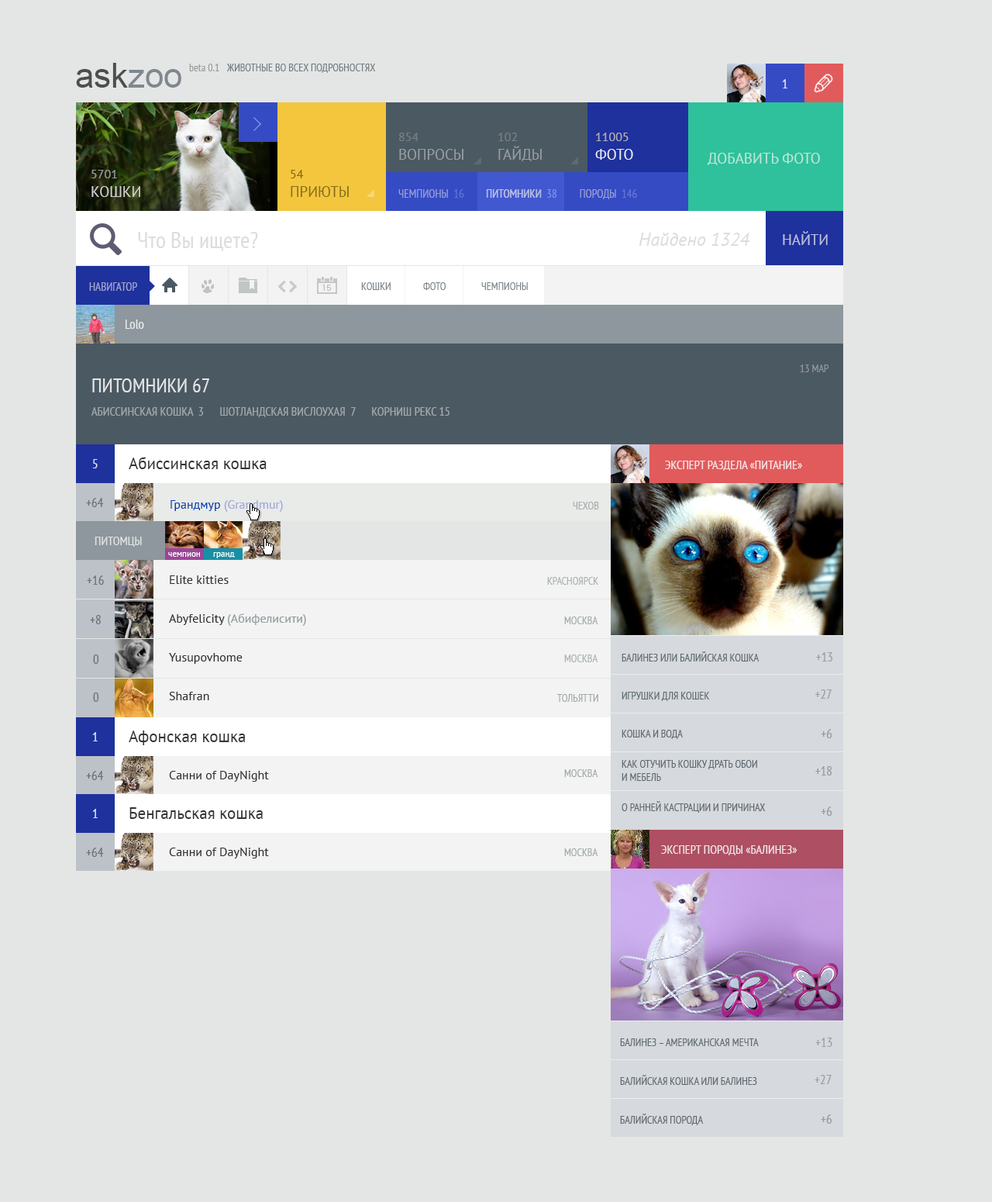
<style>
.page{position:relative;width:992px;height:1202px;background:#e4e6e5}
.page>*{position:absolute;margin:0}
.t1{font:34.1px "ArialMT"}
.t2{font:10.9px "PTSans-Narrow";color:#9a9c9b}
.t3{font:10.9px "PTSans-Narrow";color:#737d82;text-transform:uppercase}
.t4{font:13.2px "PTSans-Narrow";color:#e1e3f4}
.t5{font:14.7px/18.6px "PTSans-Regular";color:#989ea3;text-transform:uppercase}
.t6{font:12.4px/18.6px "PTSans-Regular";color:#989ea3;text-transform:uppercase}
.t7{font:12.4px/18.6px "PTSans-Regular";color:#aeaeae;text-transform:uppercase}
.t8{font:14.7px/18.6px "PTSans-Regular";color:#ebecee;text-transform:uppercase}
.t9{font:14.7px "PTSans-Regular";color:#bee7db;text-transform:uppercase}
.t10{font:14.7px/18.6px "PTSans-Regular";color:#cdcecf;text-transform:uppercase}
.t11{font:12.4px/18.6px "PTSans-Regular";color:#cdcecf;text-transform:uppercase}
.t12{font:14.7px/18.6px "PTSans-Regular";color:#866c1d;text-transform:uppercase}
.t13{font:12.4px/18.6px "PTSans-Regular";color:#866c1d;text-transform:uppercase}
.t14{font:11.6px "PTSans-Narrow";text-transform:uppercase}
.t15{font:11.6px "PTSans-Narrow";color:#b7bde4;text-transform:uppercase}
.t16{font:23.3px "PTSans-Narrow";color:#dddddd}
.t17{font:18.6px "PTSans-Italic";color:#dddddd}
.t18{font:14.7px "PTSans-Regular";color:#bcbfdb;text-transform:uppercase}
.t19{font:11.6px "PTSans-Narrow";color:#9ea3cd;text-transform:uppercase}
.t20{font:10.9px "PTSans-Narrow";color:#7b848a;text-transform:uppercase}
.t21{font:13.2px "PTSans-Narrow";color:#ffffff}
.t22{font:10.9px "PTSans-Narrow";color:#90979c}
.t23{font:20.2px "PTSans-Narrow";color:#e3e4e5;text-transform:uppercase}
.t24{font:12.4px "PTSans-Narrow";color:#a2a8ac;text-transform:uppercase}
.t25{font:13.2px "PTSans-Narrow";color:#dfe0ed}
.t26{font:16.3px "PTSans-Regular";color:#343434}
.t27{font:13.2px "PTSans-Narrow";color:#67727a}
.t28{font:12.4px "PTSans-Regular";color:#9fa8da}
.t29{font:12.4px "PTSans-Regular";color:#0042af}
.t30{font:10.9px "PTSans-Narrow";color:#a6acad;text-transform:uppercase}
.t31{font:12.4px "PTSans-Narrow";color:#e1e3e5;text-transform:uppercase}
.t32{font:8.5px "PTSans-Regular";color:#ffffff}
.t33{font:12.4px/38.8px "PTSans-Regular";color:#313131}
.t34{font:10.9px "PTSans-Narrow";color:#abb0b3;text-transform:uppercase}
.t35{font:10.9px "PTSans-Narrow";color:#a4a9ac;text-transform:uppercase}
.t36{font:12.4px "PTSans-Regular";color:#313131}
</style>
<div class="page">
<p class="t1" style="left:76px;top:63px;width:105px;height:25px">askzoo</p>
<p class="t2" style="left:189px;top:64px;width:30px;height:7px">beta 0.1</p>
<p class="t3" style="left:226px;top:64px;width:150px;height:9px">животные во всех подробностях</p>
<p class="t4" style="left:782px;top:79px;width:6px;height:9px">1</p>
<p class="t5" style="left:399px;top:133px;width:65px;height:27px"><span class="t6">854<br></span>вопросы</p>
<p class="t5" style="left:498px;top:133px;width:44px;height:28px"><span class="t6">102<br></span>гайды</p>
<p class="t7" style="left:595px;top:133px;width:38px;height:27px">11005<br><span class="t8">фото</span></p>
<p class="t9" style="left:708px;top:153px;width:112px;height:12px">добавить фото</p>
<p class="t10" style="left:91px;top:170px;width:49px;height:27px"><span class="t11">5701<br></span>кошки</p>
<p class="t12" style="left:291px;top:170px;width:58px;height:27px"><span class="t13">54<br></span>приюты</p>
<p class="t14" style="left:398px;top:189px;width:239px;height:10px">чемпионы  16         питомники  38         породы  146</p>
<p class="t15" style="left:486px;top:189px;width:71px;height:9px">питомники  38</p>
<p class="t16" style="left:138px;top:232px;width:120px;height:19px">Что Вы ищете?</p>
<p class="t17" style="left:639px;top:233px;width:111px;height:13px">Найдено 1324</p>
<p class="t18" style="left:783px;top:231px;width:45px;height:14px">Найти</p>
<p class="t19" style="left:89px;top:282px;width:48px;height:9px">навигатор</p>
<p class="t20" style="left:361px;top:282px;width:30px;height:8px">кошки</p>
<p class="t20" style="left:423px;top:282px;width:23px;height:8px">фото</p>
<p class="t20" style="left:481px;top:282px;width:47px;height:8px">чемпионы</p>
<p class="t21" style="left:126px;top:319px;width:18px;height:10px;opacity:0.8">Lolo</p>
<p class="t22" style="left:800px;top:364px;width:30px;height:8px">13 МАР</p>
<p class="t23" style="left:92px;top:378px;width:117px;height:14px">питомники 67</p>
<p class="t24" style="left:91px;top:407px;width:359px;height:10px">абиссинская кошка  3      Шотландская вислоухая  7      корниш рекс 15</p>
<p class="t25" style="left:93px;top:459px;width:5px;height:9px">5</p>
<p class="t26" style="left:129px;top:457px;width:138px;height:12px">Абиссинская кошка</p>
<p class="t27" style="left:86px;top:498px;width:18px;height:9px">+64</p>
<p class="t28" style="left:171px;top:500px;width:112px;height:12px"><span class="t29">Грандмур </span>(Grandmur)</p>
<p class="t30" style="left:573px;top:502px;width:26px;height:7px">Чехов</p>
<p class="t31" style="left:95px;top:536px;width:47px;height:11px">питомцы</p>
<p class="t32" style="left:168px;top:552px;width:32px;height:5px">чемпион</p>
<p class="t32" style="left:213px;top:552px;width:22px;height:6px">гранд</p>
<p class="t27" style="left:87px;top:575px;width:17px;height:10px">+16</p>
<p class="t33" style="left:169px;top:575px;width:137px;height:125px">Elite kitties<br>Abyfelicity (Абифелисити)<br>Yusupovhome<br>Shafran</p>
<p class="t34" style="left:547px;top:577px;width:51px;height:8px">Красноярск</p>
<p class="t27" style="left:90px;top:615px;width:11px;height:9px">+8</p>
<p class="t35" style="left:564px;top:616px;width:34px;height:8px">москва</p>
<p class="t27" style="left:93px;top:654px;width:6px;height:10px">0</p>
<p class="t34" style="left:564px;top:654px;width:34px;height:8px">москва</p>
<p class="t27" style="left:93px;top:692px;width:6px;height:10px">0</p>
<p class="t35" style="left:557px;top:694px;width:41px;height:8px">тольятти</p>
<p class="t25" style="left:92px;top:732px;width:6px;height:9px">1</p>
<p class="t26" style="left:129px;top:730px;width:117px;height:15px">Афонская кошка</p>
<p class="t27" style="left:86px;top:771px;width:18px;height:9px">+64</p>
<p class="t36" style="left:169px;top:771px;width:100px;height:10px">Санни of DayNight</p>
<p class="t35" style="left:564px;top:769px;width:34px;height:8px">москва</p>
<p class="t25" style="left:92px;top:809px;width:6px;height:9px">1</p>
<p class="t26" style="left:129px;top:807px;width:134px;height:12px">Бенгальская кошка</p>
<p class="t27" style="left:86px;top:847px;width:18px;height:10px">+64</p>
<p class="t36" style="left:169px;top:847px;width:100px;height:11px">Санни of DayNight</p>
<p class="t35" style="left:564px;top:848px;width:34px;height:8px">москва</p>
</div>
